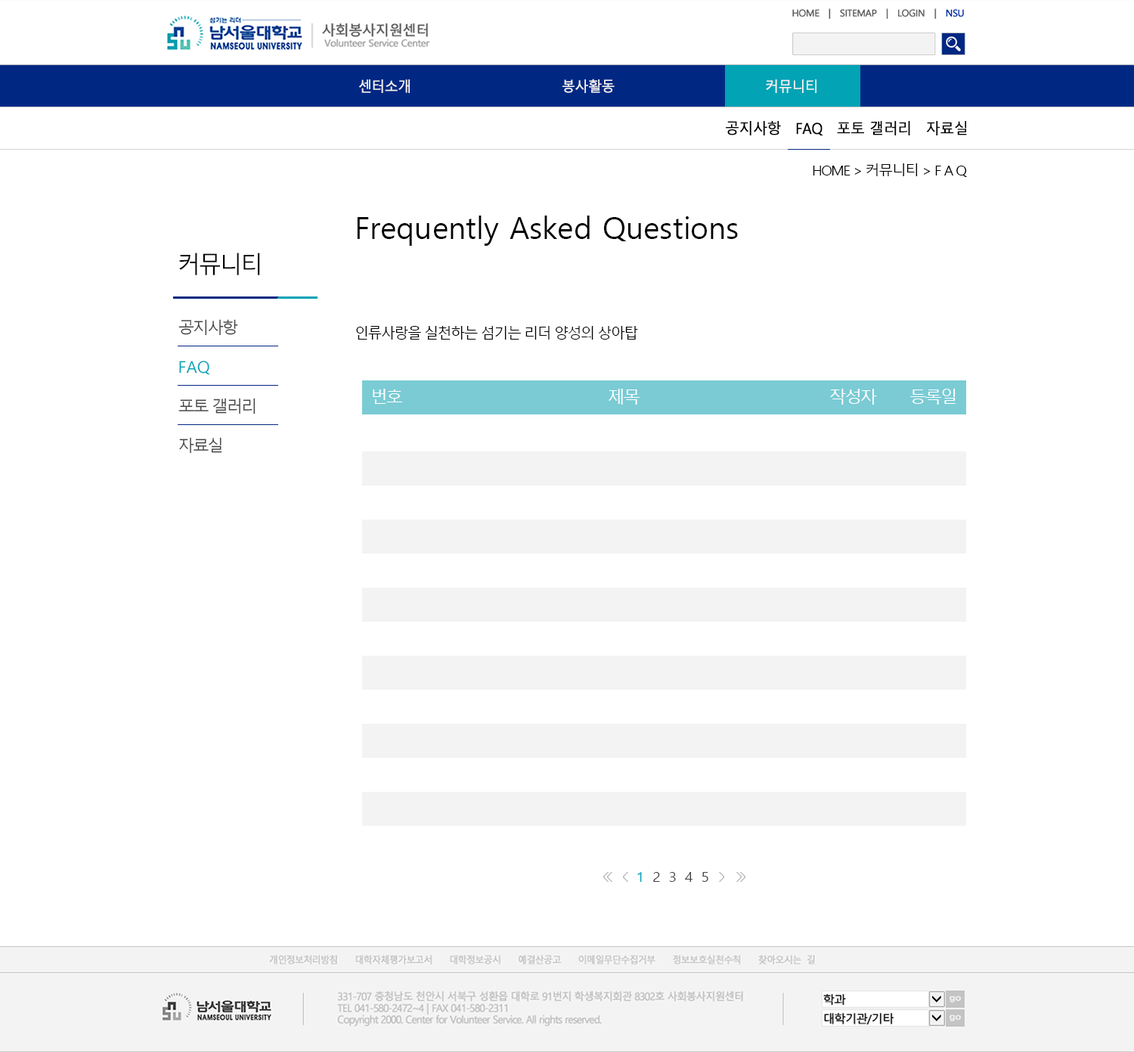
<style>
.page{position:relative;width:1134px;height:1052px;background:#ffffff}
.page>*{position:absolute;margin:0}
.t1{font:14.2px "MalgunGothicRegular";letter-spacing:-0.05em;color:#f3f3f3;font-weight:bold;scale:0.95 1}
.t2{font:15.1px "MalgunGothicRegular";letter-spacing:-0.05em;color:#000000;font-weight:bold;scale:0.95 1}
.t3{font:13.9px "MalgunGothicRegular";letter-spacing:-0.1em;color:#000000;scale:1.05 1}
.t4{font:30.2px "MalgunGothicRegular";color:#000000}
.t5{font:23.5px "MalgunGothicRegular";letter-spacing:-0.1em;color:#000000}
.t6{font:16.3px "MalgunGothicRegular";letter-spacing:-0.1em;color:#454444}
.t7{font:15.5px "MalgunGothicRegular";letter-spacing:-0.1em;color:#000000;scale:0.95 1}
.t8{font:16.3px "MalgunGothicRegular";color:#01a3b5}
.t9{font:16.3px "MalgunGothicRegular";letter-spacing:-0.1em;color:#ffffff;scale:1.05 1}
.t10{font:13.9px "MalgunGothicRegular";letter-spacing:0.1em;color:#454444;scale:1.05 1}
.t11{font:13.9px "MalgunGothicRegular";letter-spacing:0.1em;color:#01a3b5;scale:1.05 1}
</style>
<div class="page">
<p class="t1" style="left:359px;top:79px;width:457px;height:14px">센터소개        봉사활동       커뮤니티</p>
<p class="t2" style="left:726px;top:121px;width:241px;height:15px">공지사항　FAQ　포토 갤러리　자료실</p>
<p class="t3" style="left:813px;top:163px;width:155px;height:14px">HOME &gt; 커뮤니티 &gt; F A Q</p>
<p class="t4" style="left:357px;top:215px;width:381px;height:31px">Frequently Asked Questions</p>
<p class="t5" style="left:179px;top:252px;width:81px;height:23px">커뮤니티</p>
<p class="t6" style="left:178px;top:319px;width:60px;height:17px">공지사항</p>
<p class="t7" style="left:356px;top:326px;width:282px;height:13px">인류사랑을 실천하는 섬기는 리더 양성의 상아탑</p>
<p class="t8" style="left:179px;top:361px;width:31px;height:14px">FAQ</p>
<p class="t9" style="left:373px;top:389px;width:29px;height:15px">번호</p>
<p class="t9" style="left:609px;top:389px;width:31px;height:15px">제목</p>
<p class="t9" style="left:830px;top:389px;width:47px;height:15px">작성자</p>
<p class="t9" style="left:910px;top:389px;width:46px;height:15px">등록일</p>
<p class="t6" style="left:178px;top:398px;width:78px;height:16px">포토 갤러리</p>
<p class="t6" style="left:179px;top:437px;width:43px;height:16px">자료실</p>
<p class="t10" style="left:637px;top:872px;width:71px;height:9px"><span class="t11">1 </span>2 3 4 5</p>
</div>
